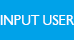
<style>
.page{position:relative;width:74px;height:40px;background:#00a2e9}
.page>*{position:absolute;margin:0}
.t1{font:13.9px "Humanist521BT-Roman";color:#ffffff;scale:0.97 1}
</style>
<div class="page">
<p class="t1" style="left:0px;top:15px;width:74px;height:10px">INPUT USER</p>
</div>
